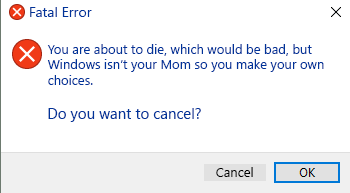
<style>
.page{position:relative;width:350px;height:193px;background:#ffffff}
.page>*{position:absolute;margin:0}
.t1{font:14px "SegoeUI";color:#003399}
.t2{font:13px "SegoeUI";color:#003399}
.t3{font:15px "SegoeUI";color:#003399}
.t4{font:13px "SegoeUI";color:#000000}
</style>
<div class="page">
<p class="t1" style="left:30px;top:7px;width:62px;height:10px">Fatal Error</p>
<p class="t2" style="left:47px;top:44px;width:277px;height:41px">You are about to die, which would be bad, but <br>Windows isn’t your Mom so you make your own <br>choices.</p>
<p class="t3" style="left:48px;top:108px;width:153px;height:14px">Do you want to cancel?</p>
<p class="t4" style="left:216px;top:167px;width:37px;height:10px">Cancel</p>
</div>
